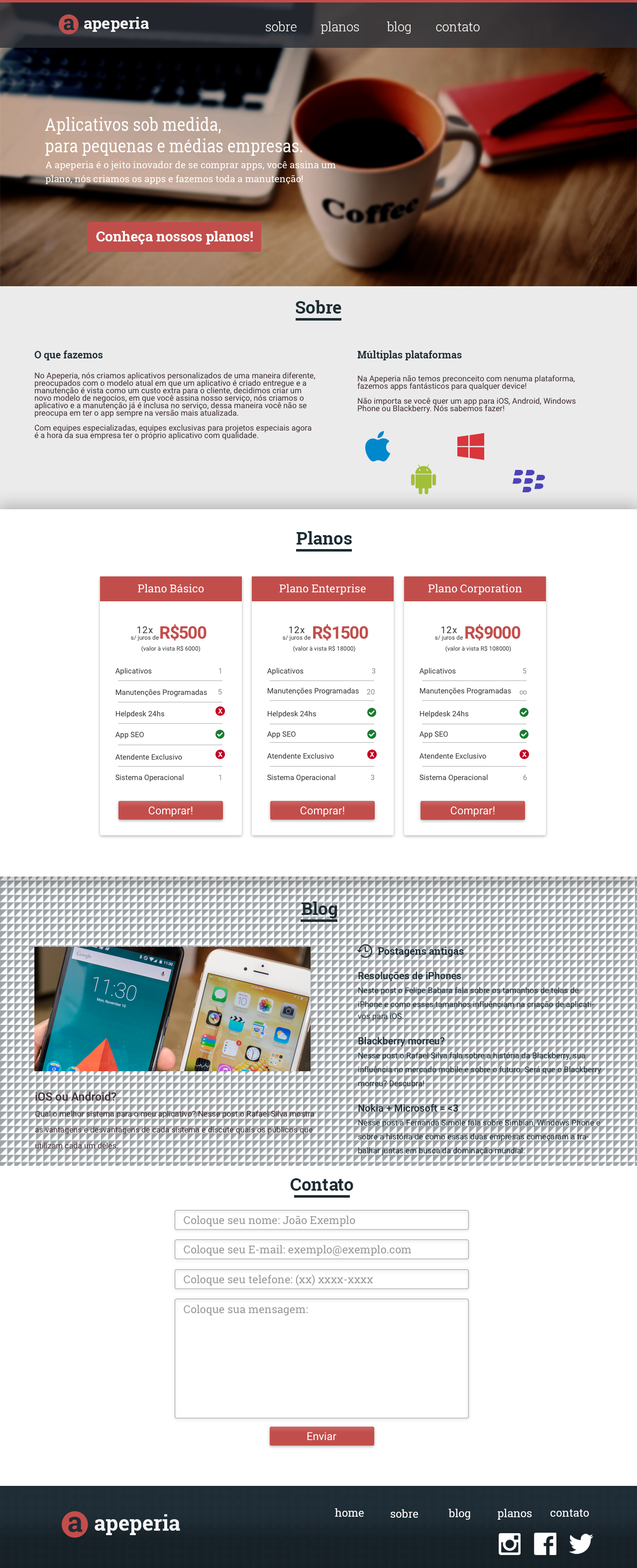
<style>
.page{position:relative;width:637px;height:1568px;background:#ffffff}
.page>*{position:absolute;margin:0}
.t1{font:15.9px "RobotoSlab-Bold";color:#f5f5f5}
.t2{font:12.4px "RobotoSlab-Light";color:#ffffff}
.t3{font:17.9px "RobotoSlab-Regular";color:#ffffff;scale:0.87 1}
.t4{font:9.5px/13.9px "RobotoSlab-Regular";color:#ffffff}
.t5{font:13.9px "RobotoSlab-Bold";color:#ffffff}
.t6{font:17.4px "RobotoSlab-Bold";color:#1c2c34}
.t7{font:10px "RobotoSlab-Bold";color:#1c2c34}
.t8{font:8px/7.5px "Roboto-Regular";color:#422e32}
.t9{font:11px "RobotoSlab-Regular";color:#ffffff}
.t10{font:9.5px "Roboto-Regular";letter-spacing:0.05em;color:#353535}
.t11{font:17.4px "Roboto-Bold";letter-spacing:-0.05em;color:#c24e4b}
.t12{font:6px "Roboto-Regular";color:#353535}
.t13{font:7.5px "Roboto-Regular";color:#353535}
.t14{font:7.5px "Roboto-Regular";color:#8a8a8a}
.t15{font:11px "Roboto-Regular";color:#ffffff}
.t16{font:8px/13.9px "Roboto-Regular";color:#1d2c34}
.t17{font:10px/13.4px "Roboto-Medium";color:#1d2c34}
.t18{font:8px/11.9px "Roboto-Regular";color:#1d2c34}
.t19{font:8px/15.9px "Roboto-Regular";color:#422e32}
.t20{font:11.4px/13.4px "Roboto-Medium";color:#422e32}
.t21{font:11px "RobotoSlab-Regular";color:#999999}
.t22{font:21.1px "RobotoSlab-Bold";color:#f5f5f5}
</style>
<div class="page">
<p class="t1" style="left:84px;top:17px;width:65px;height:15px">apeperia</p>
<p class="t2" style="left:266px;top:21px;width:31px;height:10px">sobre</p>
<p class="t2" style="left:321px;top:21px;width:38px;height:13px">planos</p>
<p class="t2" style="left:387px;top:21px;width:24px;height:13px">blog</p>
<p class="t2" style="left:436px;top:22px;width:44px;height:9px">contato</p>
<p class="t3" style="left:45px;top:117px;width:257px;height:39px;text-align:justify">Aplicativos sob medida, <br>para pequenas e médias empresas.</p>
<p class="t4" style="left:45px;top:161px;width:291px;height:23px;text-align:justify">A apeperia é o jeito inovador de se comprar apps, você assina um plano, nós criamos os apps e fazemos toda a manutenção!</p>
<p class="t5" style="left:96px;top:231px;width:157px;height:13px">Conheça nossos planos!</p>
<p class="t6" style="left:296px;top:300px;width:45px;height:14px">Sobre</p>
<p class="t7" style="left:34px;top:350px;width:69px;height:10px">O que fazemos</p>
<p class="t7" style="left:357px;top:350px;width:105px;height:10px">Múltiplas plataformas</p>
<p class="t8" style="left:34px;top:372px;width:282px;height:68px">No Apeperia, nós criamos aplicativos personalizados de uma maneira diferente,<br>preocupados com o modelo atual em que um aplicativo é criado entregue e a manutenção é vista como um custo extra para o cliente, decidimos criar um novo modelo de negocios, em que você assina nosso serviço, nós criamos o aplicativo e a manutenção já é inclusa no serviço, dessa maneira você não se preocupa em ter o app sempre na versão mais atualizada.<br><br>Com equipes especializadas, equipes exclusivas para projetos especiais agora é a hora da sua empresa ter o próprio aplicativo com qualidade.</p>
<p class="t8" style="left:357px;top:375px;width:219px;height:38px">Na Apeperia não temos preconceito com nenuma plataforma, fazemos apps fantásticos para qualquer device!<br><br>Não importa se você quer um app para iOS, Android, Windows Phone ou Blackberry. Nós sabemos fazer!</p>
<p class="t6" style="left:297px;top:531px;width:55px;height:14px">Planos</p>
<p class="t9" style="left:138px;top:584px;width:66px;height:9px">Plano Básico</p>
<p class="t9" style="left:279px;top:584px;width:87px;height:11px">Plano Enterprise</p>
<p class="t9" style="left:428px;top:584px;width:94px;height:11px">Plano Corporation</p>
<p class="t10" style="left:137px;top:626px;width:16px;height:7px">12x</p>
<p class="t11" style="left:160px;top:624px;width:47px;height:17px">R$500</p>
<p class="t10" style="left:289px;top:626px;width:16px;height:7px">12x</p>
<p class="t11" style="left:313px;top:624px;width:55px;height:17px">R$1500</p>
<p class="t10" style="left:442px;top:626px;width:15px;height:7px">12x</p>
<p class="t11" style="left:465px;top:624px;width:56px;height:17px">R$9000</p>
<p class="t12" style="left:131px;top:635px;width:28px;height:6px">s/ juros de</p>
<p class="t12" style="left:283px;top:635px;width:28px;height:6px">s/ juros de</p>
<p class="t12" style="left:435px;top:635px;width:28px;height:6px">s/ juros de</p>
<p class="t12" style="left:141px;top:646px;width:59px;height:6px">(valor à vista R$ 6000)</p>
<p class="t12" style="left:293px;top:646px;width:62px;height:6px">(valor à vista R$ 18000)</p>
<p class="t12" style="left:446px;top:646px;width:65px;height:6px">(valor à vista R$ 108000)</p>
<p class="t13" style="left:115px;top:668px;width:37px;height:7px">Aplicativos</p>
<p class="t14" style="left:219px;top:668px;width:2px;height:5px">1</p>
<p class="t13" style="left:267px;top:668px;width:37px;height:7px">Aplicativos</p>
<p class="t14" style="left:372px;top:668px;width:4px;height:6px">3</p>
<p class="t13" style="left:420px;top:668px;width:36px;height:7px">Aplicativos</p>
<p class="t14" style="left:523px;top:668px;width:4px;height:6px">5</p>
<p class="t13" style="left:115px;top:689px;width:92px;height:8px">Manutenções Programadas</p>
<p class="t14" style="left:218px;top:689px;width:4px;height:6px">5</p>
<p class="t13" style="left:267px;top:687px;width:92px;height:8px">Manutenções Programadas</p>
<p class="t14" style="left:367px;top:689px;width:8px;height:6px">20</p>
<p class="t13" style="left:420px;top:687px;width:91px;height:8px">Manutenções Programadas</p>
<p class="t14" style="left:520px;top:690px;width:7px;height:5px">∞</p>
<p class="t13" style="left:115px;top:710px;width:49px;height:8px">Helpdesk 24hs</p>
<p class="t13" style="left:267px;top:710px;width:49px;height:8px">Helpdesk 24hs</p>
<p class="t13" style="left:420px;top:710px;width:48px;height:8px">Helpdesk 24hs</p>
<p class="t13" style="left:115px;top:732px;width:29px;height:7px">App SEO</p>
<p class="t13" style="left:267px;top:731px;width:29px;height:8px">App SEO</p>
<p class="t13" style="left:420px;top:731px;width:28px;height:8px">App SEO</p>
<p class="t13" style="left:115px;top:754px;width:67px;height:6px">Atendente Exclusivo</p>
<p class="t13" style="left:267px;top:753px;width:67px;height:6px">Atendente Exclusivo</p>
<p class="t13" style="left:420px;top:753px;width:66px;height:6px">Atendente Exclusivo</p>
<p class="t13" style="left:115px;top:774px;width:69px;height:8px">Sistema Operacional</p>
<p class="t14" style="left:219px;top:775px;width:2px;height:5px">1</p>
<p class="t13" style="left:267px;top:774px;width:69px;height:8px">Sistema Operacional</p>
<p class="t14" style="left:371px;top:775px;width:4px;height:6px">3</p>
<p class="t13" style="left:420px;top:774px;width:68px;height:8px">Sistema Operacional</p>
<p class="t14" style="left:523px;top:775px;width:4px;height:6px">6</p>
<p class="t15" style="left:148px;top:806px;width:45px;height:11px">Comprar!</p>
<p class="t15" style="left:300px;top:806px;width:44px;height:11px">Comprar!</p>
<p class="t15" style="left:450px;top:806px;width:45px;height:11px">Comprar!</p>
<p class="t6" style="left:302px;top:901px;width:35px;height:17px">Blog</p>
<p class="t7" style="left:378px;top:947px;width:86px;height:10px">Postagens antigas</p>
<p class="t16" style="left:358px;top:972px;width:243px;height:183px"><span class="t17">Resoluções de iPhones<br></span>Neste post o Felipe Babara fala sobre os tamanhos de telas de iPhone e com<span class="t18">o esses tamanhos influênciam na criação de aplicativos para iOS.<br><br></span><span class="t17">Blackberry morreu?<br></span>Nesse post o Rafael Silva fala sobre a história da Blackberry, sua influência no mercado mobile e sobre o futuro. Será que o Blackberry<br>morreu? Descubra!<br><br><span class="t17">Nokia + Microsoft = &lt;3<br></span>Nesse post a Fernanda Simole fala sobre Simbian, Windows Phone e sobre a história de como essas duas empresas começaram a trabalhar juntas em busca da dominação mundial.</p>
<p class="t19" style="left:35px;top:1092px;width:280px;height:57px"><span class="t20">iOS ou Android?<br></span>Qual o melhor sistema para o meu aplicativo? Nesse post o Rafael Silva mostra as vantagens e desvantagens de cada sistema e discute quais os públicos que utilizam cada um deles.</p>
<p class="t6" style="left:290px;top:1178px;width:63px;height:13px">Contato</p>
<p class="t21" style="left:184px;top:1216px;width:171px;height:11px">Coloque seu nome: João Exemplo</p>
<p class="t21" style="left:184px;top:1245px;width:228px;height:11px">Coloque seu E-mail: exemplo@exemplo.com</p>
<p class="t21" style="left:184px;top:1274px;width:189px;height:12px">Coloque seu telefone: (xx) xxxx-xxxx</p>
<p class="t21" style="left:184px;top:1305px;width:124px;height:11px">Coloque sua mensagem:</p>
<p class="t15" style="left:307px;top:1432px;width:29px;height:9px">Enviar</p>
<p class="t22" style="left:95px;top:1514px;width:85px;height:21px">apeperia</p>
<p class="t9" style="left:335px;top:1508px;width:29px;height:9px">home</p>
<p class="t9" style="left:391px;top:1509px;width:27px;height:9px">sobre</p>
<p class="t9" style="left:448px;top:1509px;width:22px;height:11px">blog</p>
<p class="t9" style="left:498px;top:1509px;width:34px;height:11px">planos</p>
<p class="t9" style="left:551px;top:1509px;width:38px;height:8px">contato</p>
</div>
